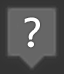
<style>
.page{position:relative;width:64px;height:74px;background:#666666}
.page>*{position:absolute;margin:0}
.t1{font:46.2px "EstrangeloEdessa";color:#ffffff}
</style>
<div class="page">
<p class="t1" style="left:24px;top:17px;width:16px;height:31px">?</p>
</div>
